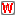
<style>
.page{position:relative;width:16px;height:16px;background:#ffffff}
.page>*{position:absolute;margin:0}
.t1{font:14px "Arial-BoldMT";color:#ff0000;scale:0.78 1}
</style>
<div class="page">
<p class="t1" style="left:2px;top:3px;width:11px;height:10px">W</p>
</div>
